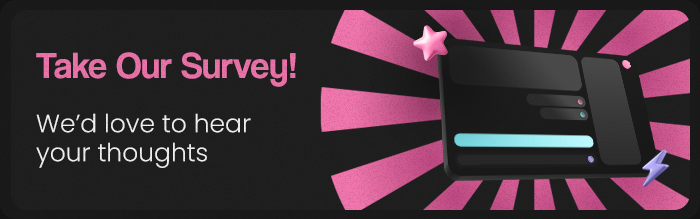
<style>
.page{position:relative;width:700px;height:219px;background:#1f1f1f}
.page>*{position:absolute;margin:0}
.t1{font:25px/29.2px "Poppins-Light";color:#f2f2f2}
.t2{font:37.5px/25px "Coolvetica-Regular";color:#ea73a9}
</style>
<div class="page">
<p class="t1" style="left:36px;top:52px;width:260px;height:116px"><span class="t2">Take Our Survey!<br><br></span>We’d love to hear <br>your thoughts</p>
</div>
